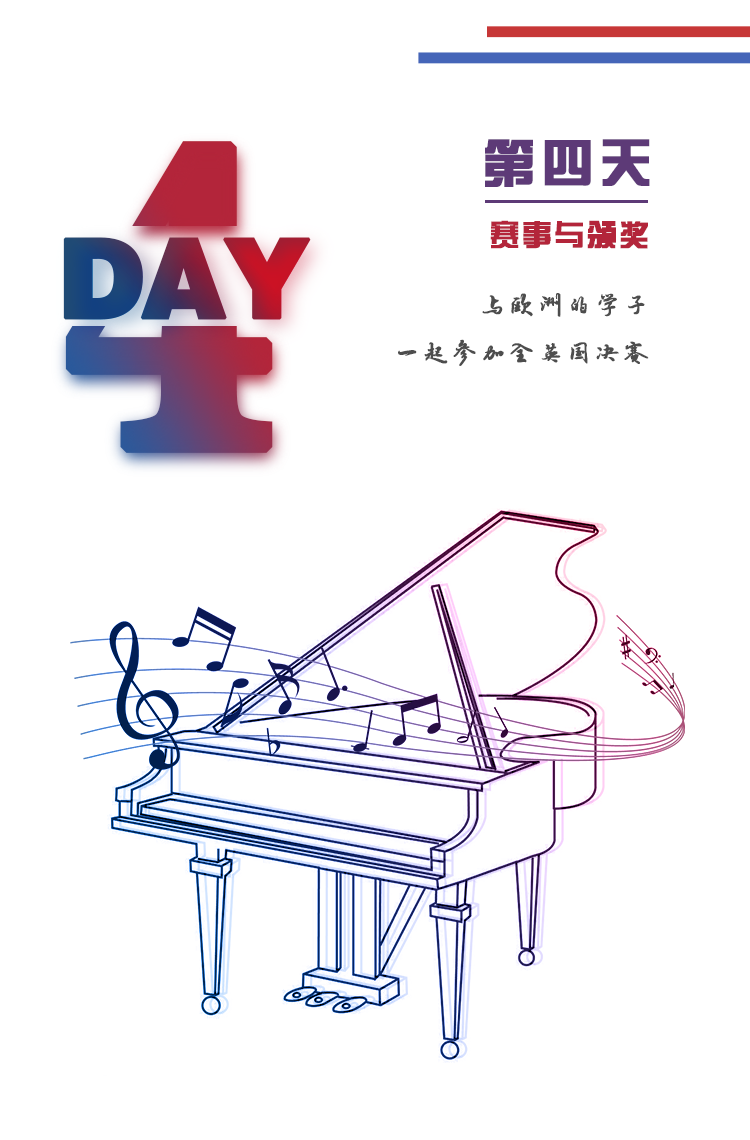
<style>
.page{position:relative;width:750px;height:1140px;background:#ffffff}
.page>*{position:absolute;margin:0}
.t1{font:432.9px "News706BT-BoldC";letter-spacing:-0.05em;font-weight:bold}
.t2{font:52px "FZZYJW--GB1-0";letter-spacing:0.1em;color:#5d3a77;font-weight:bold}
.t3{font:30px "FZZYJW--GB1-0";letter-spacing:0.05em;color:#b3253a;font-weight:bold}
.t4{font:110px "FZCCHJW--GB1-0";letter-spacing:-0.05em;font-weight:bold}
.t5{font:26px/48px "·½ÕýÂÀ½¨µÂ×ÖÌå";letter-spacing:0.075em;color:#4d4d4d;font-weight:bold}
</style>
<div class="page">
<p class="t1" style="left:65px;top:141px;width:208px;height:312px">4</p>
<p class="t2" style="left:485px;top:139px;width:165px;height:48px">第四天</p>
<p class="t3" style="left:490px;top:220px;width:158px;height:29px">赛事与颁奖</p>
<p class="t4" style="left:63px;top:237px;width:248px;height:83px">DAY</p>
<p class="t5" style="left:398px;top:293px;width:251px;height:73px">与欧洲的学子<br>一起参加全英国决赛</p>
</div>
